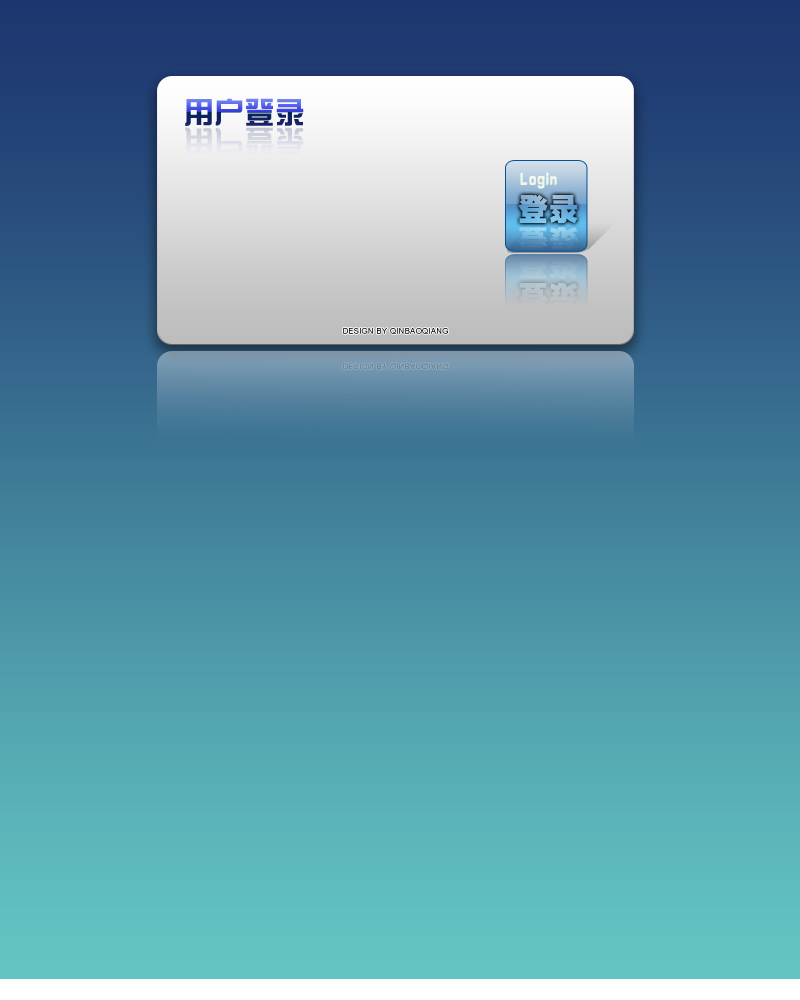
<style>
.page{position:relative;width:800px;height:1000px}
.page>*{position:absolute;margin:0}
.t1{font:30px "DFZongYi-Bd-80-Win-GB";letter-spacing:0.05em}
.t2{font:30px "DFZongYi-Bd-80-Win-GB";letter-spacing:0.05em;color:#dbdee4}
.t3{font:18px "HYk2gj";letter-spacing:0.05em;color:#f1f7eb;scale:0.7 1}
.t4{font:30px "¾­µäÌØºÚ¼ò Regular";letter-spacing:0.05em}
.t5{font:23.1px "¾­µäÌØºÚ¼ò Regular";letter-spacing:0.05em;scale:1.3 1}
.t6{font:30px "¾­µäÌØºÚ¼ò Regular";letter-spacing:0.05em;color:#bbc2c6}
.t7{font:8px "ArialMT";letter-spacing:0.05em}
.t8{font:8px "ArialMT";letter-spacing:0.05em;color:#5f798d}
</style>
<div class="page">
<p class="t1" style="left:185px;top:98px;width:119px;height:28px">用户登录</p>
<p class="t2" style="left:185px;top:127px;width:119px;height:28px">用户登录</p>
<p class="t3" style="left:520px;top:172px;width:37px;height:17px">Login</p>
<p class="t4" style="left:518px;top:194px;width:60px;height:30px">登录</p>
<p class="t5" style="left:518px;top:227px;width:60px;height:23px">登录</p>
<p class="t6" style="left:518px;top:282px;width:60px;height:30px">登录</p>
<p class="t7" style="left:343px;top:328px;width:105px;height:6px">DESIGN BY QINBAOQIANG</p>
<p class="t8" style="left:343px;top:363px;width:105px;height:7px">DESIGN BY QINBAOQIANG</p>
</div>
